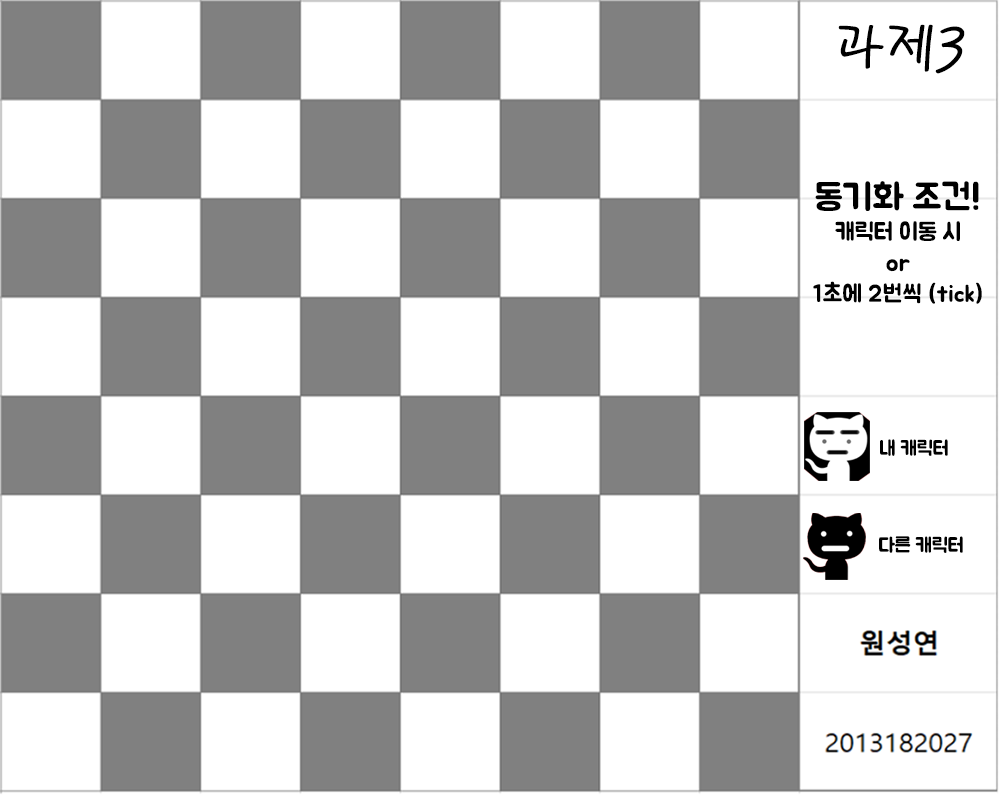
<style>
.page{position:relative;width:1000px;height:800px;background:#ffffff}
.page>*{position:absolute;margin:0}
.t1{font:60px "PyunjiR-HM";color:#000000}
.t2{font:36px "BMJUA";color:#000000}
.t3{font:24px "BMJUA";color:#000000}
.t4{font:20px "BMJUA";color:#000000}
</style>
<div class="page">
<p class="t1" style="left:838px;top:24px;width:127px;height:50px">과제3</p>
<p class="t2" style="left:815px;top:181px;width:164px;height:30px">동기화 조건!</p>
<p class="t3" style="left:835px;top:221px;width:125px;height:20px">캐릭터 이동 시</p>
<p class="t3" style="left:886px;top:258px;width:24px;height:14px">or</p>
<p class="t3" style="left:813px;top:281px;width:169px;height:23px">1초에 2번씩 (tick)</p>
<p class="t4" style="left:880px;top:439px;width:68px;height:17px">내 캐릭터</p>
<p class="t4" style="left:879px;top:536px;width:84px;height:17px">다른 캐릭터</p>
</div>
